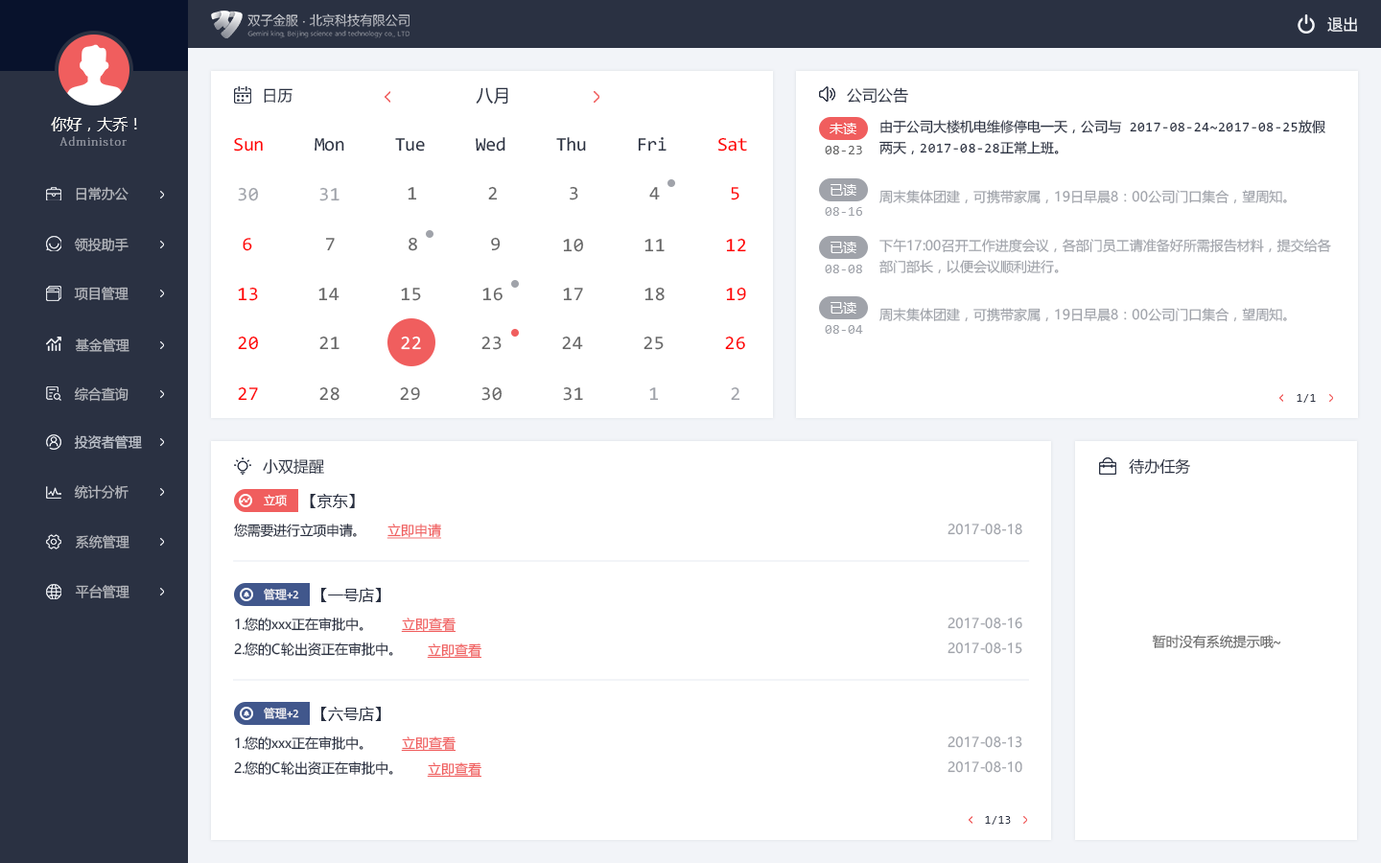
<style>
.page{position:relative;width:1381px;height:863px;background:#ffffff}
.page>*{position:absolute;margin:0}
.t1{font:15.3px "MicrosoftYaHeiMono";color:#f2f4f8}
.t2{font:15.3px "MicrosoftYaHeiMono";color:#2a3142}
.t3{font:17.3px "MicrosoftYaHeiMono";color:#2a3142}
.t4{font:15.3px "MicrosoftYaHeiMono";color:#fffdf7}
.t5{font:13.4px "MicrosoftYaHeiMono";color:#ffffff}
.t6{font:13.4px/21.1px "MicrosoftYaHeiMono";color:#2a3142}
.t7{font:11.5px "AdobeFangsongStd-Regular";letter-spacing:0.1em;color:#9296a1}
.t8{font:19.2px "MicrosoftYaHeiMono";letter-spacing:-0.046em;color:#2a3142}
.t9{font:19.2px "MicrosoftYaHeiMono";letter-spacing:-0.046em;color:#ff0202}
.t10{font:19.2px "MicrosoftYaHeiMono";letter-spacing:-0.046em;color:#fe0000}
.t11{font:13.4px "MicrosoftYaHeiMono";color:#666666}
.t12{font:13.4px "MicrosoftYaHeiUI";color:#b4b7bd}
.t13{font:19.2px "MicrosoftYaHeiMono";color:#a0a3aa}
.t14{font:19.2px "MicrosoftYaHeiMono";letter-spacing:0.03em;color:#666666}
.t15{font:19.2px "MicrosoftYaHeiMono";letter-spacing:0.03em;color:#ff0101}
.t16{font:13.4px "MicrosoftYaHeiUI";color:#a0a3aa}
.t17{font:13.4px "MicrosoftYaHeiMono";color:#a0a3aa}
.t18{font:19.2px "MicrosoftYaHeiMono";letter-spacing:-0.032em;color:#666666}
.t19{font:19.2px "MicrosoftYaHeiMono";letter-spacing:-0.032em;color:#ff0202}
.t20{font:19.2px "MicrosoftYaHeiMono";color:#666666}
.t21{font:19.2px "MicrosoftYaHeiMono";color:#ff0202}
.t22{font:13.4px/21.1px "MicrosoftYaHeiUI";color:#a0a3aa}
.t23{font:19.2px "MicrosoftYaHeiMono";color:#ffffff}
.t24{font:11.5px "MicrosoftYaHeiMono";color:#2a3142}
.t25{font:11.5px "MicrosoftYaHei";color:#ffffff}
.t26{font:13.4px "MicrosoftYaHeiUI";letter-spacing:-0.02em;color:#2a3142}
.t27{font:13.4px "MicrosoftYaHeiUI";color:#2a3142}
.t28{font:13.4px "MicrosoftYaHeiMono";color:#f05e5e;text-decoration:underline}
.t29{font:11.5px "MicrosoftYaHeiMono";color:#fffefe}
</style>
<div class="page">
<p class="t1" style="left:1328px;top:16px;width:29px;height:16px">退出</p>
<p class="t2" style="left:264px;top:88px;width:29px;height:16px">日历</p>
<p class="t3" style="left:476px;top:87px;width:32px;height:18px">八月</p>
<p class="t2" style="left:847px;top:87px;width:61px;height:17px">公司公告</p>
<p class="t4" style="left:51px;top:117px;width:86px;height:14px">你好，大乔！</p>
<p class="t5" style="left:830px;top:123px;width:27px;height:11px">未读</p>
<p class="t6" style="left:880px;top:120px;width:446px;height:35px">由于公司大楼机电维修停电一天，公司与 2017-08-24~2017-08-25放假<br>两天，2017-08-28正常上班。</p>
<p class="t7" style="left:59px;top:136px;width:68px;height:10px">Administor</p>
<p class="t8" style="left:234px;top:137px;width:513px;height:15px"><span class="t9">Sun     </span>Mon     Tue     Wed     Thu     Fri     <span class="t10">Sat</span></p>
<p class="t11" style="left:825px;top:146px;width:37px;height:8px">08-23</p>
<p class="t5" style="left:831px;top:184px;width:26px;height:12px">已读</p>
<p class="t12" style="left:76px;top:187px;width:53px;height:13px">日常办公</p>
<p class="t13" style="left:238px;top:187px;width:21px;height:14px">30</p>
<p class="t13" style="left:319px;top:187px;width:21px;height:14px">31</p>
<p class="t14" style="left:408px;top:186px;width:332px;height:14px">1      2      3      4      <span class="t15">5</span></p>
<p class="t16" style="left:880px;top:190px;width:407px;height:14px">周末集体团建，可携带家属，19日早晨8：00公司门口集合，望周知。</p>
<p class="t17" style="left:825px;top:207px;width:37px;height:9px">08-16</p>
<p class="t12" style="left:74px;top:238px;width:55px;height:13px">领投助手</p>
<p class="t18" style="left:243px;top:237px;width:258px;height:14px"><span class="t19">6       </span>7       8       9</p>
<p class="t20" style="left:563px;top:238px;width:21px;height:14px">10</p>
<p class="t20" style="left:645px;top:239px;width:20px;height:13px">11</p>
<p class="t21" style="left:726px;top:238px;width:20px;height:14px">12</p>
<p class="t5" style="left:831px;top:242px;width:26px;height:11px">已读</p>
<p class="t22" style="left:880px;top:239px;width:451px;height:35px">下午17:00召开工作进度会议，各部门员工请准备好所需报告材料，提交给各<br>部门部长，以便会议顺利进行。</p>
<p class="t17" style="left:825px;top:265px;width:37px;height:8px">08-08</p>
<p class="t12" style="left:74px;top:287px;width:55px;height:14px">项目管理</p>
<p class="t21" style="left:238px;top:287px;width:20px;height:14px">13</p>
<p class="t20" style="left:318px;top:288px;width:22px;height:13px">14</p>
<p class="t20" style="left:401px;top:288px;width:20px;height:13px">15</p>
<p class="t20" style="left:482px;top:288px;width:21px;height:13px">16</p>
<p class="t20" style="left:563px;top:288px;width:20px;height:13px">17</p>
<p class="t20" style="left:645px;top:287px;width:20px;height:14px">18</p>
<p class="t21" style="left:726px;top:287px;width:20px;height:14px">19</p>
<p class="t5" style="left:831px;top:302px;width:26px;height:12px">已读</p>
<p class="t16" style="left:880px;top:308px;width:407px;height:14px">周末集体团建，可携带家属，19日早晨8：00公司门口集合，望周知。</p>
<p class="t17" style="left:825px;top:325px;width:38px;height:9px">08-04</p>
<p class="t12" style="left:75px;top:339px;width:54px;height:13px">基金管理</p>
<p class="t21" style="left:238px;top:336px;width:21px;height:14px">20</p>
<p class="t20" style="left:319px;top:336px;width:21px;height:14px">21</p>
<p class="t23" style="left:401px;top:336px;width:20px;height:14px">22</p>
<p class="t20" style="left:482px;top:336px;width:20px;height:14px">23</p>
<p class="t20" style="left:562px;top:336px;width:21px;height:14px">24</p>
<p class="t20" style="left:644px;top:336px;width:20px;height:14px">25</p>
<p class="t21" style="left:725px;top:336px;width:20px;height:14px">26</p>
<p class="t12" style="left:74px;top:388px;width:55px;height:14px">综合查询</p>
<p class="t21" style="left:238px;top:387px;width:20px;height:14px">27</p>
<p class="t20" style="left:319px;top:387px;width:21px;height:14px">28</p>
<p class="t20" style="left:400px;top:387px;width:20px;height:14px">29</p>
<p class="t20" style="left:482px;top:387px;width:21px;height:14px">30</p>
<p class="t20" style="left:563px;top:387px;width:20px;height:14px">31</p>
<p class="t13" style="left:649px;top:388px;width:10px;height:13px">1</p>
<p class="t13" style="left:731px;top:387px;width:10px;height:14px">2</p>
<p class="t24" style="left:1297px;top:394px;width:19px;height:9px">1/1</p>
<p class="t12" style="left:74px;top:435px;width:68px;height:14px">投资者管理</p>
<p class="t2" style="left:263px;top:459px;width:61px;height:16px">小双提醒</p>
<p class="t2" style="left:1129px;top:459px;width:61px;height:16px">待办任务</p>
<p class="t12" style="left:74px;top:485px;width:55px;height:14px">统计分析</p>
<p class="t25" style="left:264px;top:494px;width:23px;height:12px">立项</p>
<p class="t2" style="left:310px;top:494px;width:45px;height:14px">【京东】</p>
<p class="t26" style="left:234px;top:524px;width:123px;height:14px">您需要进行立项申请<span class="t27">。</span></p>
<p class="t28" style="left:387px;top:524px;width:54px;height:15px">立即申请</p>
<p class="t16" style="left:948px;top:524px;width:75px;height:11px">2017-08-18</p>
<p class="t12" style="left:75px;top:535px;width:54px;height:14px">系统管理</p>
<p class="t12" style="left:75px;top:585px;width:54px;height:14px">平台管理</p>
<p class="t29" style="left:264px;top:588px;width:35px;height:12px">管理+2</p>
<p class="t2" style="left:321px;top:588px;width:60px;height:14px">【一号店】</p>
<p class="t27" style="left:235px;top:618px;width:129px;height:14px">1.您的xxx正在审批中。</p>
<p class="t28" style="left:401px;top:618px;width:55px;height:14px">立即查看</p>
<p class="t16" style="left:948px;top:618px;width:75px;height:11px">2017-08-16</p>
<p class="t11" style="left:1152px;top:635px;width:130px;height:13px">暂时没有系统提示哦~</p>
<p class="t27" style="left:234px;top:643px;width:159px;height:14px">2.您的C轮出资正在审批中。</p>
<p class="t28" style="left:427px;top:644px;width:55px;height:14px">立即查看</p>
<p class="t16" style="left:948px;top:643px;width:75px;height:11px">2017-08-15</p>
<p class="t29" style="left:264px;top:707px;width:35px;height:12px">管理+2</p>
<p class="t2" style="left:321px;top:707px;width:60px;height:14px">【六号店】</p>
<p class="t27" style="left:235px;top:737px;width:129px;height:14px">1.您的xxx正在审批中。</p>
<p class="t28" style="left:401px;top:737px;width:55px;height:14px">立即查看</p>
<p class="t16" style="left:948px;top:737px;width:75px;height:11px">2017-08-13</p>
<p class="t27" style="left:234px;top:762px;width:159px;height:14px">2.您的C轮出资正在审批中。</p>
<p class="t16" style="left:948px;top:762px;width:75px;height:11px">2017-08-10</p>
<p class="t28" style="left:427px;top:763px;width:55px;height:14px">立即查看</p>
<p class="t24" style="left:985px;top:816px;width:26px;height:9px">1/13</p>
</div>
